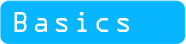
<style>
.page{position:relative;width:186px;height:44px;background:#07b6fe}
.page>*{position:absolute;margin:0}
.t1{font:25px "OCRAStd";letter-spacing:0.1em;color:#ffffff}
</style>
<div class="page">
<p class="t1" style="left:14px;top:12px;width:115px;height:20px">Basics</p>
</div>
